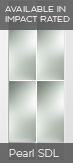
<style>
.page{position:relative;width:73px;height:163px}
.page>*{position:absolute;margin:0}
.t1{font:8.4px/9.7px "Gotham-Thin";letter-spacing:0.025em}
.t2{font:10.3px "Gotham-Thin";letter-spacing:0.025em}
</style>
<div class="page">
<p class="t1" style="left:5px;top:6px;width:65px;height:16px">AVAILABLE IN <br>IMPACT RATED</p>
<p class="t2" style="left:9px;top:149px;width:50px;height:8px">Pearl SDL</p>
</div>
